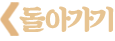
<style>
.page{position:relative;width:115px;height:41px;background:#ffffff}
.page>*{position:absolute;margin:0}
.t1{font:29px "SDKukdetopokki-bBd";letter-spacing:-0.06em;color:#e7c492}
.t2{font:29px "SDKukdetopokki-bBd";letter-spacing:-0.14em;color:#e7c492}
.t3{font:29px "SDKukdetopokki-bBd";letter-spacing:-0.16em;color:#e7c492}
.t4{font:29px "SDKukdetopokki-bBd";letter-spacing:-0.12em;color:#e7c492}
</style>
<div class="page">
<p class="t1" style="left:19px;top:6px;width:95px;height:26px">돌<span class="t2">아</span><span class="t3">가</span><span class="t4">기</span></p>
</div>
